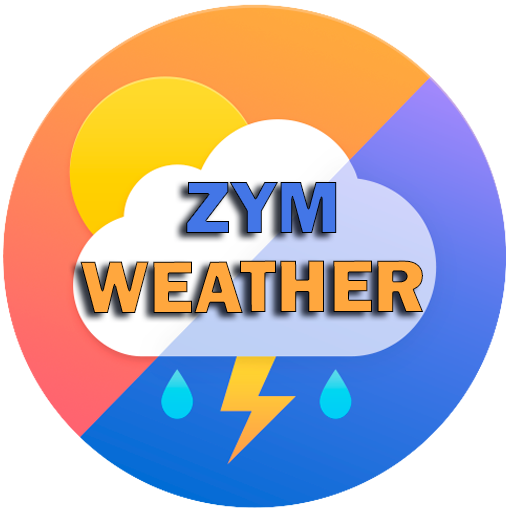
<style>
.page{position:relative;width:512px;height:512px;background:#ffffff}
.page>*{position:absolute;margin:0}
.t1{font:77px "FranklinGothic-Heavy";color:#4376e7}
.t2{font:77px "FranklinGothic-Heavy";color:#ffa73e}
</style>
<div class="page">
<p class="t1" style="left:186px;top:182px;width:151px;height:51px">ZYM</p>
<p class="t2" style="left:80px;top:260px;width:344px;height:53px">WEATHER</p>
</div>
